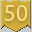
<style>
.page{position:relative;width:32px;height:32px}
.page>*{position:absolute;margin:0}
.t1{font:23.3px "MyriadPro-Regular";color:#f7dc87}
</style>
<div class="page">
<p class="t1" style="left:4px;top:5px;width:24px;height:16px">50</p>
</div>
